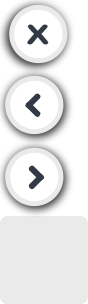
<style>
.page{position:relative;width:88px;height:304px;background:#eaeaea}
.page>*{position:absolute;margin:0}
.t1{font:37.1px "ArialRoundedMTBold";color:#323a46;scale:1.21 1}
</style>
<div class="page">
<p class="t1" style="left:27px;top:24px;width:22px;height:21px">x</p>
</div>
